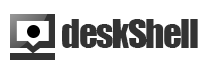
<style>
.page{position:relative;width:208px;height:76px;background:#ffffff}
.page>*{position:absolute;margin:0}
.t1{font:37.5px "Impact";letter-spacing:-0.05em;color:#333333}
</style>
<div class="page">
<p class="t1" style="left:62px;top:19px;width:136px;height:29px">deskShell</p>
</div>
